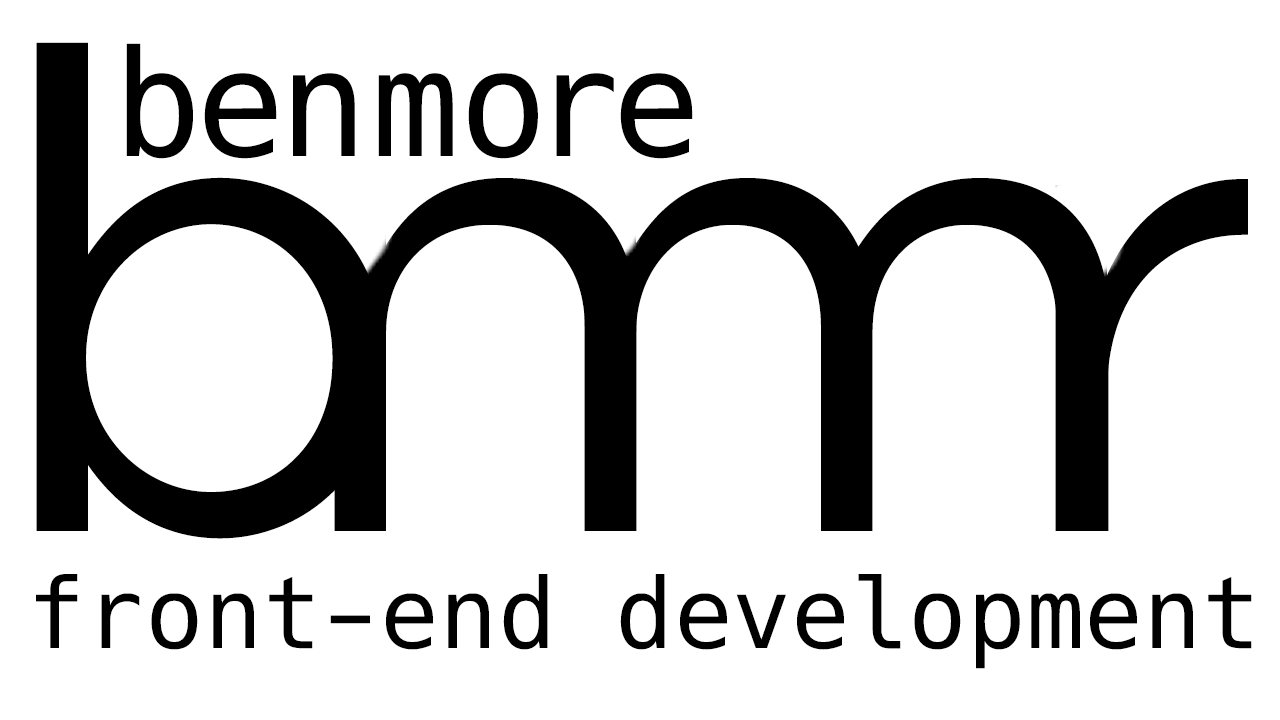
<style>
.page{position:relative;width:1280px;height:720px;background:#ffffff}
.page>*{position:absolute;margin:0}
.t1{font:668.6px "Gotham-Book";color:#000000}
.t2{font:147.4px "Hack";color:#000000}
.t3{font:97.5px "Hack";color:#000000}
</style>
<div class="page">
<p class="t1" style="left:36px;top:42px;width:350px;height:497px">b</p>
<p class="t2" style="left:126px;top:43px;width:567px;height:116px">benmore</p>
<p class="t1" style="left:334px;top:178px;width:303px;height:353px">n</p>
<p class="t1" style="left:584px;top:178px;width:525px;height:353px">m</p>
<p class="t1" style="left:1055px;top:179px;width:193px;height:352px">r</p>
<p class="t3" style="left:36px;top:574px;width:1216px;height:95px">front-end development</p>
</div>
